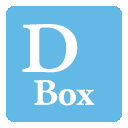
<style>
.page{position:relative;width:128px;height:128px;background:#62b9e6}
.page>*{position:absolute;margin:0}
.t1{font:75.4px "STSongti-SC-Black";color:#ffffff}
.t2{font:38.5px "STSongti-SC-Black";color:#ffffff}
</style>
<div class="page">
<p class="t1" style="left:22px;top:24px;width:56px;height:49px">D</p>
<p class="t2" style="left:34px;top:80px;width:61px;height:26px">Boxx</p>
</div>
